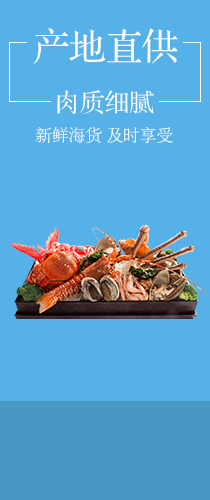
<style>
.page{position:relative;width:210px;height:500px;background:#55b1e8}
.page>*{position:absolute;margin:0}
.t1{font:36.5px "FZS3JW--GB1-0";color:#ffffff}
.t2{font:25px "FZS3JW--GB1-0";color:#ffffff}
.t3{font:16.7px "FZSYJW--GB1-0";color:#ffffff}
</style>
<div class="page">
<p class="t1" style="left:33px;top:28px;width:145px;height:36px">产地直供</p>
<p class="t2" style="left:57px;top:90px;width:97px;height:24px">肉质细腻</p>
<p class="t3" style="left:35px;top:127px;width:138px;height:17px">新鲜海货 及时享受</p>
</div>
